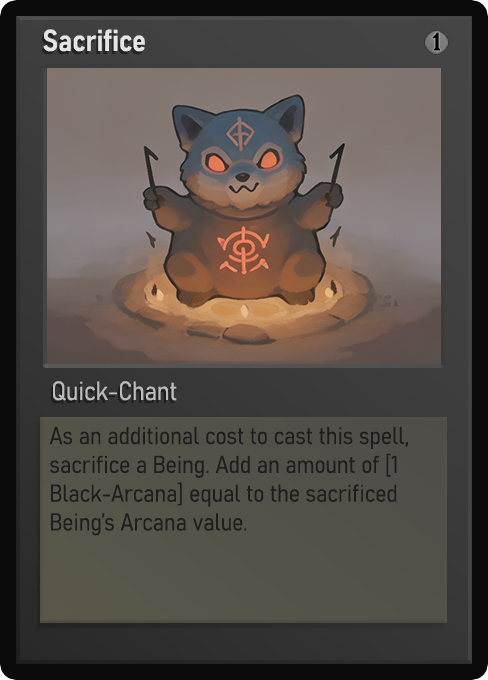
<style>
.page{position:relative;width:488px;height:680px}
.page>*{position:absolute;margin:0}
.t1{font:30px "Bahnschrift-SemiBoldSemiCondensed";color:#f2f2f2;font-weight:bold}
.t2{font:25px "WTRRoycroft";color:#000000;font-weight:bold;scale:1.09 1}
.t3{font:26px "Bahnschrift-LightSemiCondensed";color:#c8c8c8;font-weight:bold}
.t4{font:24px "Bahnschrift-LightSemiCondensed";color:#1e1e1e;font-weight:bold}
</style>
<div class="page">
<p class="t1" style="left:43px;top:29px;width:102px;height:23px;opacity:0.9">Sacrifice</p>
<p class="t2" style="left:432px;top:32px;width:9px;height:19px">1</p>
<p class="t3" style="left:53px;top:381px;width:124px;height:20px;opacity:0.9">Quick-Chant</p>
<p class="t4" style="left:49px;top:427px;width:359px;height:109px">As an additional cost to cast this spell, sacrifice a Being. Add an amount of [1 Black-Arcana] equal to the sacrificed Being’s Arcana value.</p>
</div>
